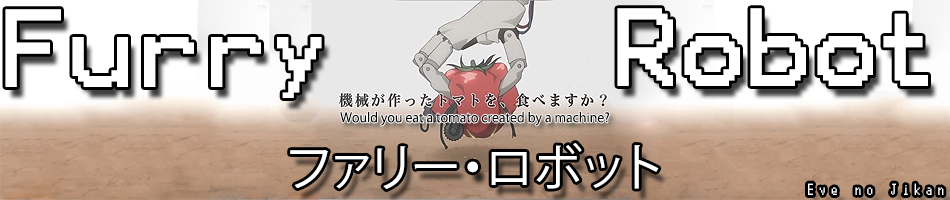
<style>
.page{position:relative;width:950px;height:200px}
.page>*{position:absolute;margin:0}
.t1{font:88.8px "Terminal";color:#ffffff}
.t2{font:12.8px "KozGoPr6N-Regular";color:#000000}
.t3{font:49.8px "KozGoPr6N-Regular";color:#ffffff}
.t4{font:15.8px "Terminal";color:#ffffff}
</style>
<div class="page">
<p class="t1" style="left:617px;top:8px;width:311px;height:78px">Robot</p>
<p class="t2" style="left:340px;top:111px;width:270px;height:15px">Would you eat a tomato created by a machine?</p>
<p class="t3" style="left:290px;top:143px;width:369px;height:46px">ファリー・ロボット</p>
<p class="t4" style="left:808px;top:183px;width:136px;height:12px">Eve no Jikan</p>
</div>
